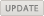
<style>
.page{position:relative;width:44px;height:16px}
.page>*{position:absolute;margin:0}
.t1{font:9px "MyriadPro-Regular";letter-spacing:0.05em;color:#80807f}
</style>
<div class="page">
<p class="t1" style="left:5px;top:5px;width:34px;height:7px">UPDATE</p>
</div>
